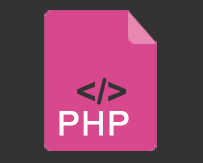
<style>
.page{position:relative;width:203px;height:163px;background:#333333}
.page>*{position:absolute;margin:0}
.t1{font:33.1px "ArialMT";letter-spacing:0.04em;color:#ffffff;font-weight:bold}
</style>
<div class="page">
<p class="t1" style="left:59px;top:111px;width:70px;height:25px">PHP</p>
</div>
